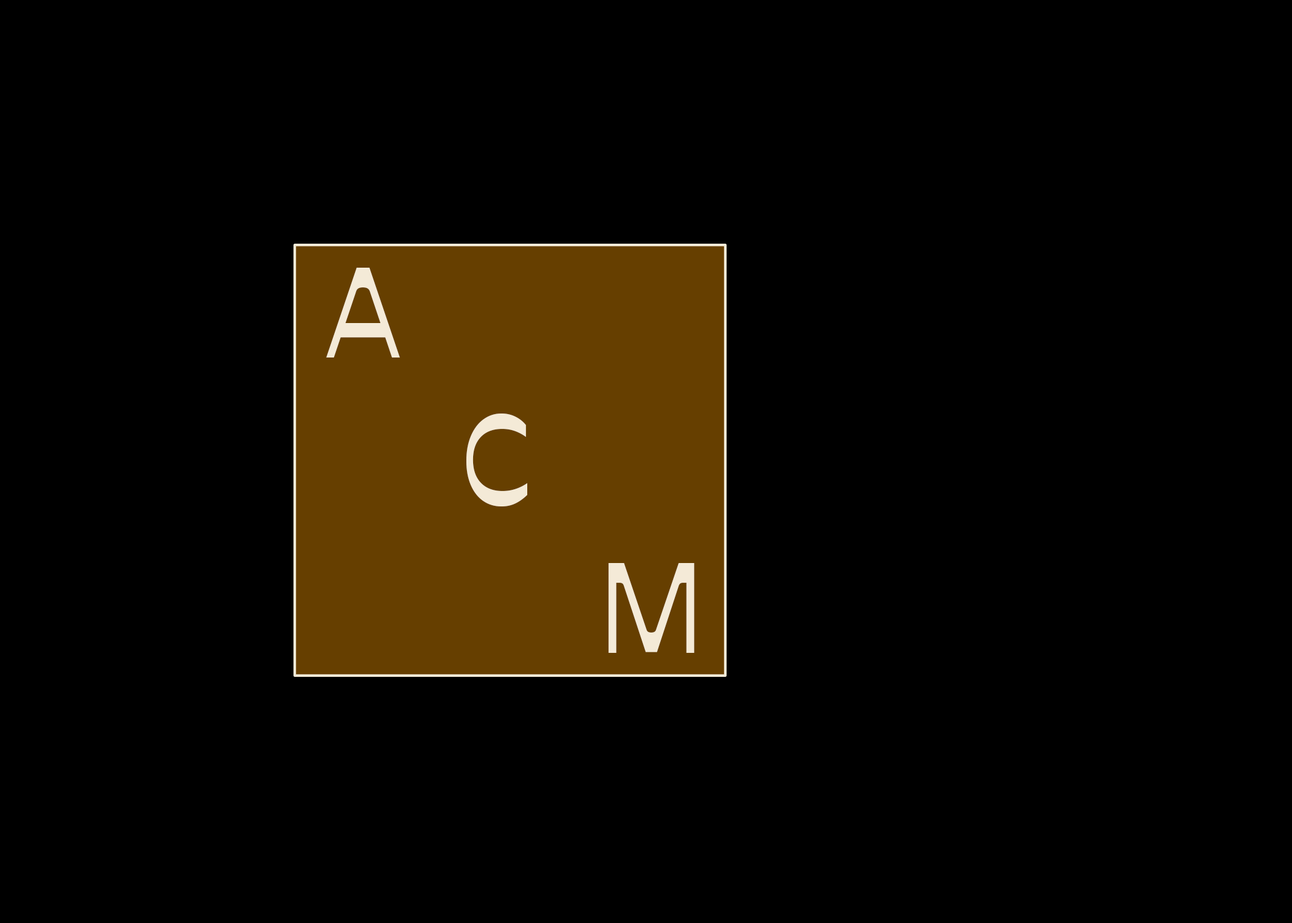
<style>
.page{position:relative;width:1292px;height:923px;background:#000000}
.page>*{position:absolute;margin:0}
.t1{font:123.1px "AntipolVFRoman-Regular";color:#f4ead7}
</style>
<div class="page">
<p class="t1" style="left:326px;top:268px;width:369px;height:385px;text-align:center">A<br>            C<br>                          M</p>
</div>
